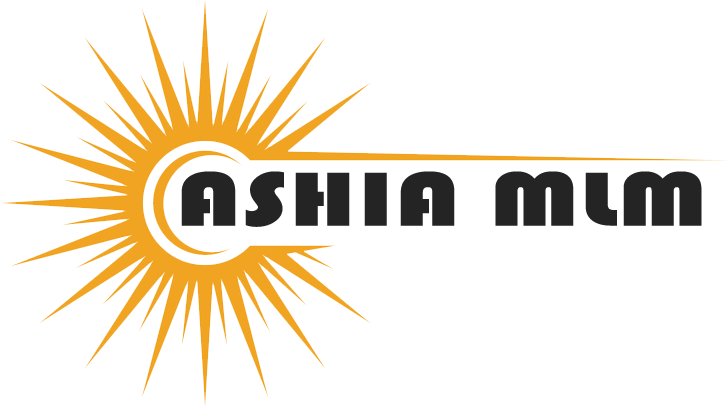
<style>
.page{position:relative;width:726px;height:407px;background:#ffffff}
.page>*{position:absolute;margin:0}
.t1{font:79px "Bauhaus93";letter-spacing:0.01em;color:#242424;scale:1.39 1}
</style>
<div class="page">
<p class="t1" style="left:181px;top:171px;width:521px;height:56px">ASHIA MLM</p>
</div>
